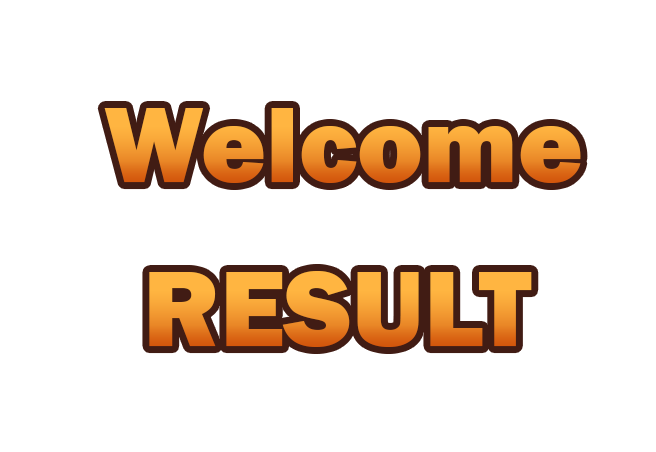
<style>
.page{position:relative;width:656px;height:452px;background:#ffffff}
.page>*{position:absolute;margin:0}
.t1{font:111.3px "FranklinGothic-Heavy";color:#ff9e35}
</style>
<div class="page">
<p class="t1" style="left:104px;top:108px;width:477px;height:75px">Welcome</p>
<p class="t1" style="left:149px;top:271px;width:383px;height:76px">RESULT</p>
</div>
